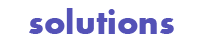
<style>
.page{position:relative;width:200px;height:50px;background:#ffffff}
.page>*{position:absolute;margin:0}
.t1{font:35px "Aharoni-Bold";color:#5452b7}
</style>
<div class="page">
<p class="t1" style="left:29px;top:8px;width:145px;height:26px">solutions</p>
</div>
